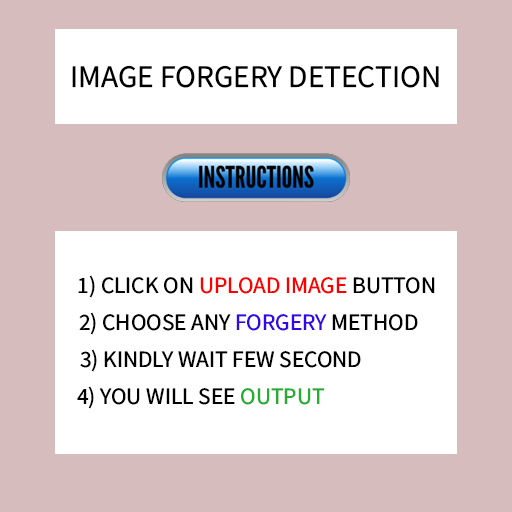
<style>
.page{position:relative;width:512px;height:512px;background:#d6bcbc}
.page>*{position:absolute;margin:0}
.t1{font:31.4px "SourceSansRoman-Regular";color:#000000;text-transform:uppercase}
.t2{font:23.4px "SourceSansRoman-Regular";color:#ff0000;text-transform:uppercase}
.t3{font:23.4px "SourceSansRoman-Regular";color:#000000;text-transform:uppercase}
.t4{font:23.4px "SourceSansRoman-Regular";color:#3207ea;text-transform:uppercase}
.t5{font:23.4px "SourceSansRoman-Regular";color:#25ad32;text-transform:uppercase}
</style>
<div class="page">
<p class="t1" style="left:72px;top:65px;width:367px;height:23px">Image forgery detection</p>
<p class="t2" style="left:78px;top:275px;width:357px;height:23px"><span class="t3">1) Click on </span>upload image<span class="t3"> button</span></p>
<p class="t3" style="left:79px;top:312px;width:339px;height:23px">2) Choose Any <span class="t4">forgery </span>method</p>
<p class="t3" style="left:80px;top:349px;width:281px;height:23px">3) kindly wait few second</p>
<p class="t3" style="left:77px;top:386px;width:248px;height:23px">4) you will see <span class="t5">output</span></p>
</div>
